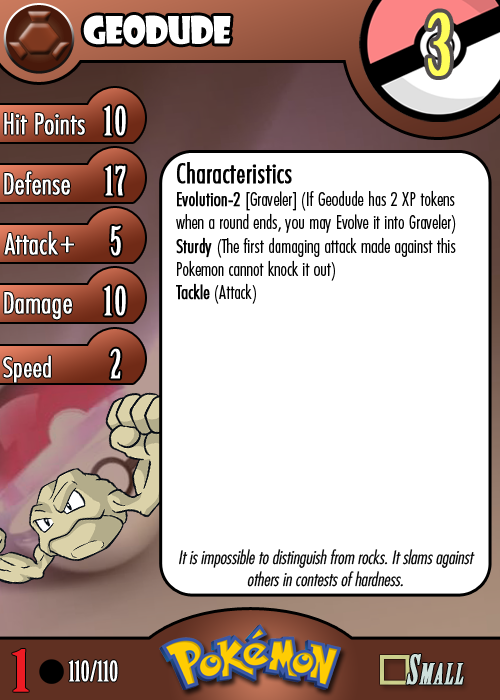
<style>
.page{position:relative;width:500px;height:700px;background:#ffffff}
.page>*{position:absolute;margin:0}
.t1{font:36.7px "ShowcardGothic-Reg";letter-spacing:-0.025em;color:#ffffff;scale:0.91 1}
.t2{font:83.3px "BirchStd";letter-spacing:0.025em;color:#fffd59;font-weight:bold}
.t3{font:27.8px "Futura-CondensedLight";color:#ffffff;font-weight:bold}
.t4{font:38.9px "BirchStd";letter-spacing:0.035em;color:#ffffff;font-weight:bold}
.t5{font:19.4px "FuturaCondensedBQ-Light";color:#010101}
.t6{font:27.8px "FuturaCondensedBQ-Light";color:#010101;font-weight:bold}
.t7{font:19.4px "FuturaCondensedBQ-Light";color:#010101;font-weight:bold}
.t8{font:30.6px "Futura-CondensedLight";color:#ffffff;font-weight:bold}
.t9{font:27.8px "FuturaCondensedBQ-Light";color:#ffffff;font-weight:bold}
.t10{font:18.1px "Futura-CondensedLight";color:#010101;font-style:italic}
.t11{font:55.6px "BirchStd";color:#ed1c24;font-weight:bold;scale:1.5 1}
.t12{font:27.8px "BirchStd";color:#ffffff;font-weight:bold}
</style>
<div class="page">
<p class="t1" style="left:83px;top:15px;width:148px;height:30px">geodude</p>
<p class="t2" style="left:428px;top:12px;width:22px;height:64px">3</p>
<p class="t3" style="left:4px;top:113px;width:81px;height:22px">Hit Points</p>
<p class="t4" style="left:104px;top:105px;width:22px;height:31px">10</p>
<p class="t3" style="left:4px;top:171px;width:66px;height:24px">Defense</p>
<p class="t4" style="left:105px;top:165px;width:21px;height:31px">17</p>
<p class="t5" style="left:176px;top:162px;width:280px;height:142px"><span class="t6">Characteristics<br></span><span class="t7">Evolution-2 </span>[Graveler] (If Geodude has 2 XP tokens when a round ends, you may Evolve it into Graveler)<br><span class="t7">Sturdy</span> (The first damaging attack made against this Pokemon cannot knock it out)<br><span class="t7">Tackle</span> (Attack)</p>
<p class="t3" style="left:4px;top:231px;width:54px;height:24px">Attack</p>
<p class="t4" style="left:111px;top:225px;width:10px;height:31px">5</p>
<p class="t8" style="left:60px;top:236px;width:14px;height:17px">+</p>
<p class="t3" style="left:4px;top:292px;width:68px;height:28px">Damage</p>
<p class="t4" style="left:104px;top:285px;width:22px;height:31px">10</p>
<p class="t4" style="left:110px;top:348px;width:11px;height:31px">2</p>
<p class="t9" style="left:3px;top:355px;width:48px;height:28px">Speed</p>
<p class="t10" style="left:179px;top:549px;width:296px;height:38px;text-align:center">It is impossible to distinguish from rocks. It slams against others in contests of hardness.</p>
<p class="t11" style="left:12px;top:649px;width:17px;height:43px">1</p>
<p class="t12" style="left:68px;top:660px;width:50px;height:22px">110/110</p>
</div>
